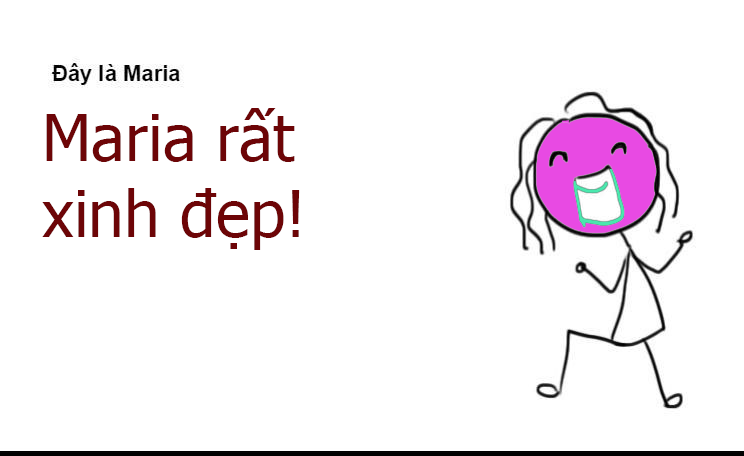
<style>
.page{position:relative;width:744px;height:456px;background:#ffffff}
.page>*{position:absolute;margin:0}
.t1{font:64px "Tahoma";color:#6d0507}
</style>
<div class="page">
<p class="t1" style="left:42px;top:108px;width:258px;height:142px">Maria rất xinh đẹp!</p>
</div>
